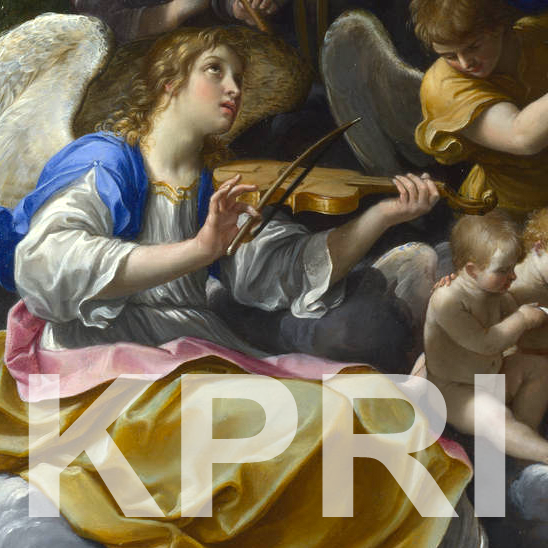
<style>
.page{position:relative;width:548px;height:548px}
.page>*{position:absolute;margin:0}
.t1{font:200px "Arial-BoldMT";scale:1.06 1}
</style>
<div class="page">
<p class="t1" style="left:28px;top:374px;width:478px;height:143px">KPRI</p>
</div>
